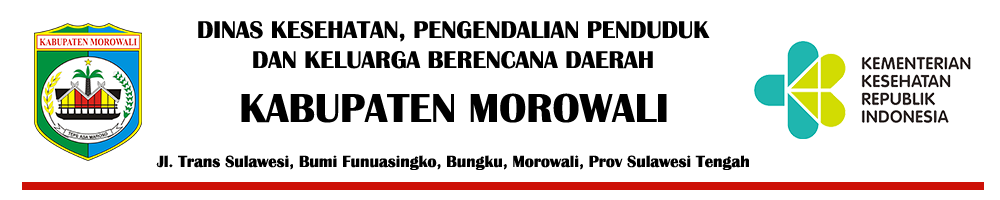
<style>
.page{position:relative;width:1000px;height:200px;background:#ffffff}
.page>*{position:absolute;margin:0}
.t1{font:25px "BritannicBold";color:#000000}
.t2{font:41.7px "BritannicBold";color:#000000}
.t3{font:16.7px "BritannicBold";color:#000000}
</style>
<div class="page">
<p class="t1" style="left:198px;top:21px;width:512px;height:48px;text-align:center">DINAS KESEHATAN, PENGENDALIAN PENDUDUK<br>DAN KELUARGA BERENCANA DAERAH</p>
<p class="t2" style="left:241px;top:93px;width:426px;height:30px">KABUPATEN MOROWALI</p>
<p class="t3" style="left:156px;top:155px;width:593px;height:15px">Jl. Trans Sulawesi, Bumi Funuasingko, Bungku, Morowali, Prov Sulawesi Tengah</p>
</div>
